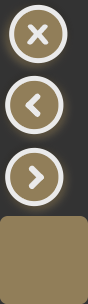
<style>
.page{position:relative;width:88px;height:304px;background:#917e59}
.page>*{position:absolute;margin:0}
.t1{font:37.1px "ArialRoundedMTBold";color:#eaeaea;scale:1.21 1}
</style>
<div class="page">
<p class="t1" style="left:27px;top:24px;width:22px;height:21px">x</p>
</div>
